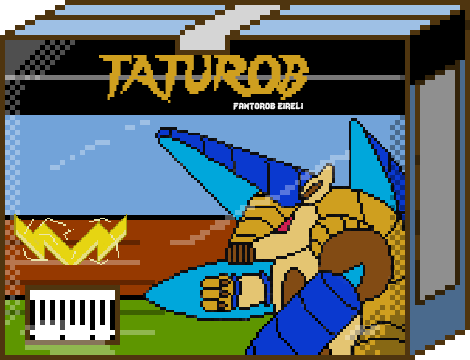
<style>
.page{position:relative;width:470px;height:360px}
.page>*{position:absolute;margin:0}
.t1{font:48px "Lady-Radical";color:#cf9f1f;scale:0.72 1}
.t2{font:12px "Lady-Radical";color:#fbfbfb}
</style>
<div class="page">
<p class="t1" style="left:99px;top:55px;width:210px;height:48px">TATUROB</p>
<p class="t2" style="left:233px;top:102px;width:70px;height:8px">fantorob eireli</p>
</div>
